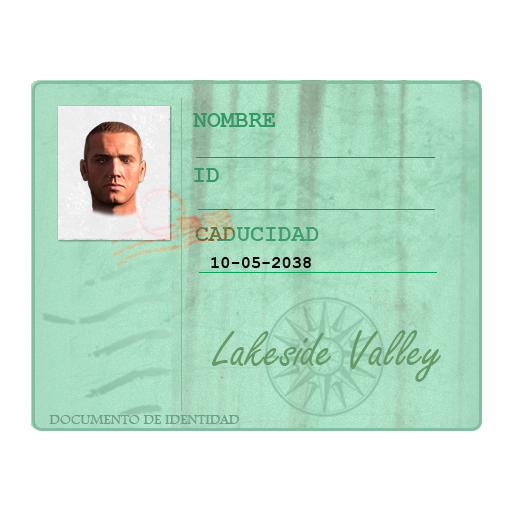
<style>
.page{position:relative;width:512px;height:512px;background:#ffffff}
.page>*{position:absolute;margin:0}
.t1{font:23px "CourierNewPS-BoldMT";color:#339966}
.t2{font:23px "CourierNewPS-BoldMT";color:#3e9e6d}
.t3{font:17px "CourierNewPS-BoldMT";color:#000000}
.t4{font:56px "FreestyleScript-Regular";color:#669966}
.t5{font:15px "FootlightMTLight";color:#6ea087}
</style>
<div class="page">
<p class="t1" style="left:193px;top:113px;width:82px;height:14px">NOMBRE</p>
<p class="t1" style="left:194px;top:168px;width:25px;height:14px">ID</p>
<p class="t2" style="left:195px;top:227px;width:124px;height:14px">CADUCIDAD</p>
<p class="t3" style="left:211px;top:257px;width:100px;height:11px">10-05-2038</p>
<p class="t4" style="left:211px;top:330px;width:230px;height:52px">Lakeside Valley</p>
<p class="t5" style="left:49px;top:415px;width:190px;height:9px">DOCUMENTO DE IDENTIDAD</p>
</div>
